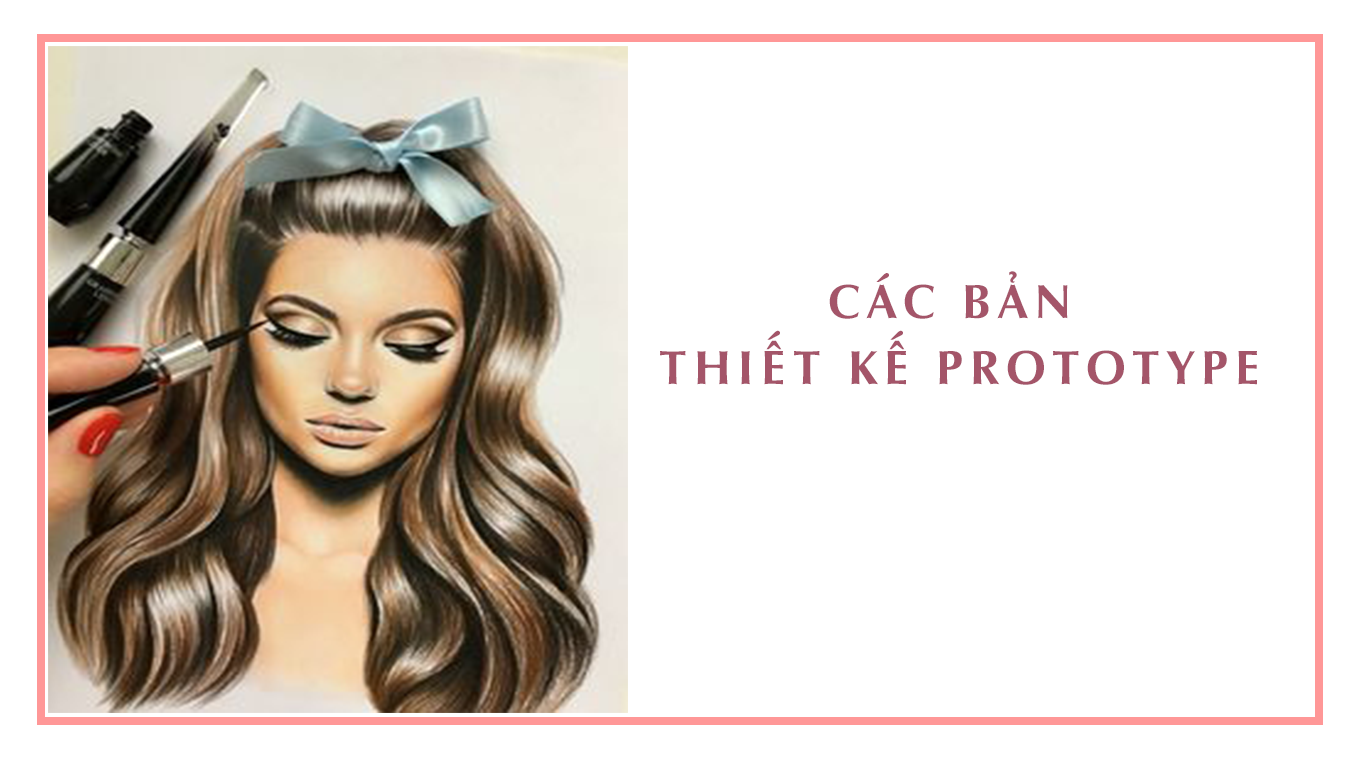
<style>
.page{position:relative;width:1366px;height:768px;background:#ffffff}
.page>*{position:absolute;margin:0}
.t1{font:48px/22px "UVNNhanBold";letter-spacing:0.15em;color:#a45569;text-transform:uppercase}
</style>
<div class="page">
<p class="t1" style="left:660px;top:271px;width:597px;height:114px;text-align:center">CÁC BẢN <br><br><br>THIẾT KẾ PROTOTYPE</p>
</div>
